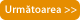
<style>
.page{position:relative;width:80px;height:20px;background:#e68d00}
.page>*{position:absolute;margin:0}
.t1{font:11px "MyriadPro-Semibold";color:#ffffff}
</style>
<div class="page">
<p class="t1" style="left:5px;top:5px;width:72px;height:8px">Următoarea &gt;&gt;</p>
</div>
